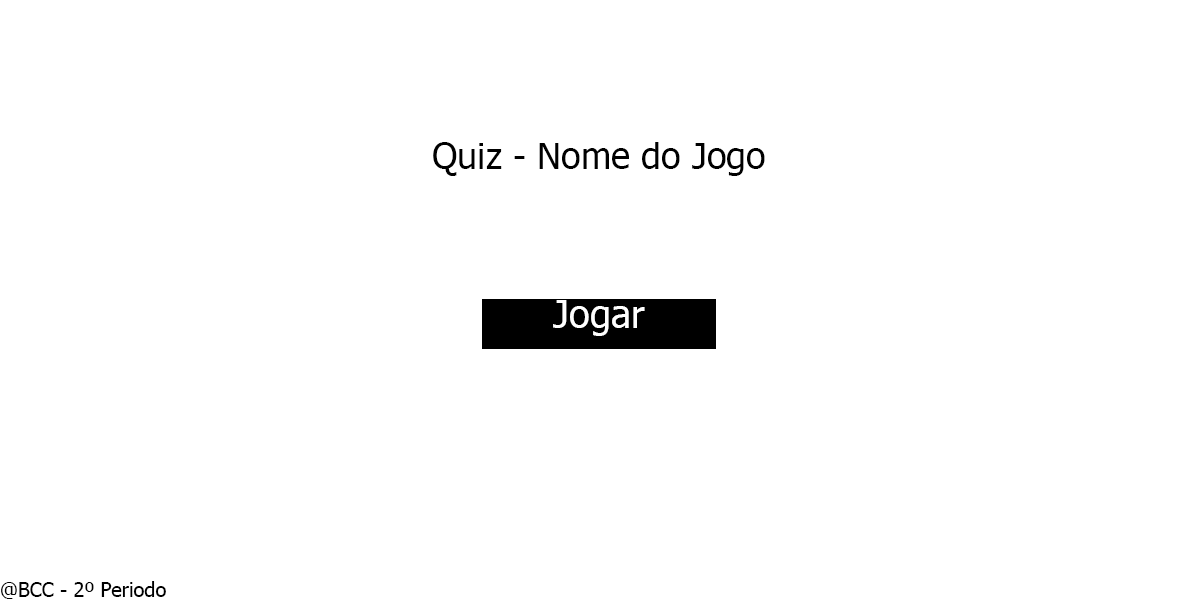
<style>
.page{position:relative;width:1200px;height:600px;background:#ffffff}
.page>*{position:absolute;margin:0}
.t1{font:36px "Tahoma";color:#000000}
.t2{font:38px "Tahoma";color:#ffffff}
.t3{font:20px "Tahoma";color:#000000}
</style>
<div class="page">
<p class="t1" style="left:433px;top:142px;width:332px;height:34px">Quiz - Nome do Jogo</p>
<p class="t2" style="left:553px;top:300px;width:92px;height:36px">Jogar</p>
<p class="t3" style="left:1px;top:581px;width:165px;height:18px">@BCC - 2º Periodo</p>
</div>
